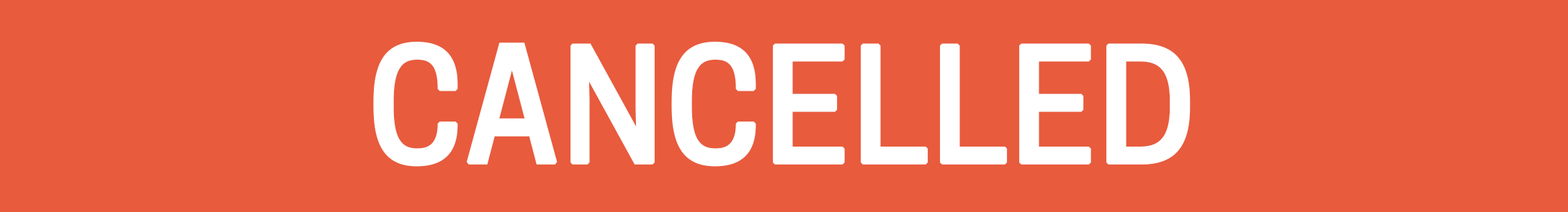
<style>
.page{position:relative;width:1568px;height:212px;background:#e85b3d}
.page>*{position:absolute;margin:0}
.t1{font:150.1px "CooperHewitt-Medium";color:#ffffff;font-weight:bold}
</style>
<div class="page">
<p class="t1" style="left:373px;top:42px;width:818px;height:125px">CANCELLED</p>
</div>
